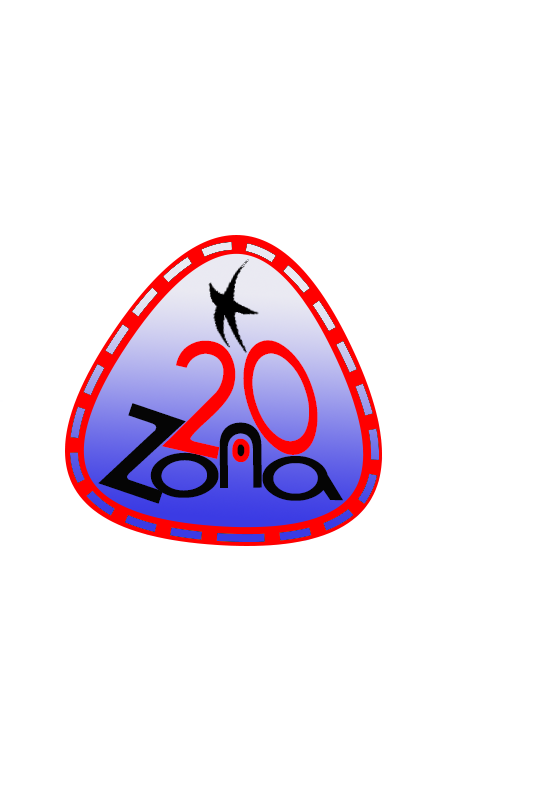
<style>
.page{position:relative;width:554px;height:788px;background:#ffffff}
.page>*{position:absolute;margin:0}
.t1{font:158.9px "Rondalo";color:#ff0000;scale:0.89 1}
.t2{font:174.4px "Rondalo";color:#ff0000;scale:0.56 1}
.t3{font:193.3px "Rondalo";color:#050505;scale:0.93 1}
.t4{font:146.4px "Rondalo";color:#050505;scale:0.77 1}
.t5{font:209.6px "Rondalo";color:#ff0000;scale:0.75 1}
.t6{font:102.6px "Rondalo";color:#050505;scale:0.59 1}
.t7{font:100px "Rondalo";color:#050505;scale:1.51 1}
.t8{font:100px "Rondalo";color:#050505;scale:1.46 1}
</style>
<div class="page">
<p class="t1" style="left:162px;top:340px;width:74px;height:119px;rotate:13deg">2</p>
<p class="t2" style="left:243px;top:340px;width:75px;height:115px;rotate:-21deg">0</p>
<p class="t3" style="left:98px;top:403px;width:88px;height:101px;rotate:19deg">z</p>
<p class="t4" style="left:219px;top:422px;width:43px;height:66px;rotate:-1deg">n</p>
<p class="t5" style="left:232px;top:438px;width:18px;height:24px">.</p>
<p class="t6" style="left:237px;top:444px;width:8px;height:13px">.</p>
<p class="t7" style="left:150px;top:452px;width:69px;height:46px;rotate:179deg">o</p>
<p class="t8" style="left:262px;top:456px;width:81px;height:45px">a</p>
</div>
